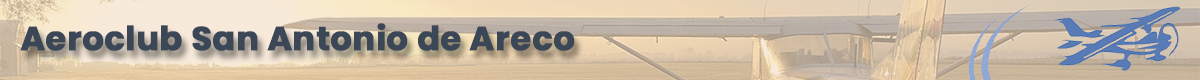
<style>
.page{position:relative;width:1200px;height:80px}
.page>*{position:absolute;margin:0}
.t1{font:33.3px "Poppins-Bold";color:#3b4757;font-weight:bold}
</style>
<div class="page">
<p class="t1" style="left:20px;top:23px;width:555px;height:28px">Aeroclub San Antonio de Areco</p>
</div>
